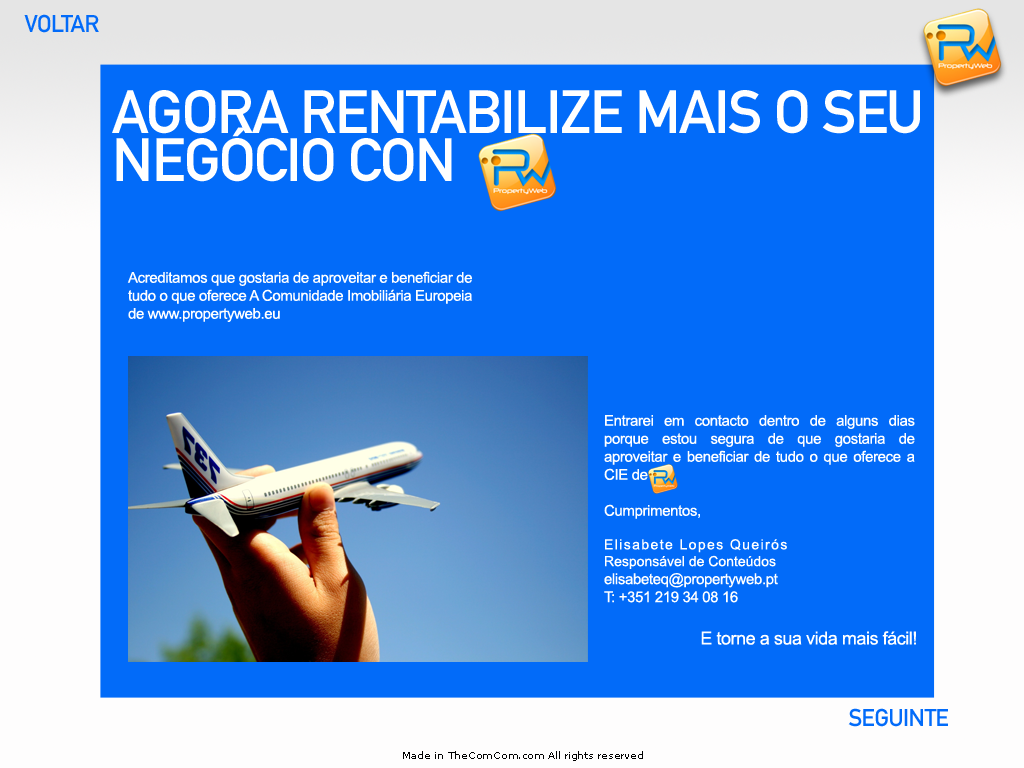
<style>
.page{position:relative;width:1024px;height:768px;background:#026bf9}
.page>*{position:absolute;margin:0}
.t1{font:24px "DINMittelschriftStd";letter-spacing:-0.025em;color:#026bf9}
.t2{font:60px "DINMittelschriftStd";letter-spacing:-0.025em;color:#ffffff;text-transform:uppercase}
.t3{font:15px "ArialMT";letter-spacing:-0.025em;color:#ffffff}
.t4{font:14px "ArialMT";letter-spacing:0.1em;color:#ffffff}
.t5{font:14px "ArialMT";color:#ffffff}
.t6{font:18px "ArialMT";letter-spacing:-0.025em;color:#ffffff}
.t7{font:10px "MSReferenceSansSerif";letter-spacing:-0.025em;color:#010101}
</style>
<div class="page">
<p class="t1" style="left:24px;top:14px;width:75px;height:19px">VOLTAR</p>
<p class="t2" style="left:112px;top:90px;width:808px;height:92px">AGORA RENTABILIZE MAIS O SEU NEGÓCIO CON</p>
<p class="t3" style="left:127px;top:271px;width:345px;height:51px">Acreditamos que gostaria de aproveitar e beneficiar de tudo o que oferece A Comunidade Imobiliária Europeia de www.propertyweb.eu</p>
<p class="t3" style="left:604px;top:415px;width:311px;height:188px;text-align:justify">Entrarei em contacto dentro de alguns dias porque estou segura de que gostaria de aproveitar e beneficiar de tudo o que oferece a CIE de <br><br>Cumprimentos, <br><br><span class="t4">Elisabete Lopes Queirós<br></span><span class="t5">Responsável de Conteúdos<br></span>elisabeteq@propertyweb.pt<br>T: +351 219 34 08 16</p>
<p class="t6" style="left:701px;top:631px;width:215px;height:14px">E torne a sua vida mais fácil!</p>
<p class="t1" style="left:848px;top:708px;width:100px;height:19px">SEGUINTE</p>
<p class="t7" style="left:403px;top:751px;width:240px;height:10px">Made in TheComCom.com All rights reserved</p>
</div>
